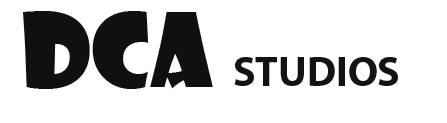
<style>
.page{position:relative;width:447px;height:123px;background:#ffffff}
.page>*{position:absolute;margin:0}
.t1{font:100px "ShowcardGothic-Reg";color:#111010}
.t2{font:41.7px "MyriadPro-Bold";color:#141313}
</style>
<div class="page">
<p class="t1" style="left:23px;top:11px;width:190px;height:78px">DcA</p>
<p class="t2" style="left:234px;top:57px;width:164px;height:29px">STUDIOS</p>
</div>
